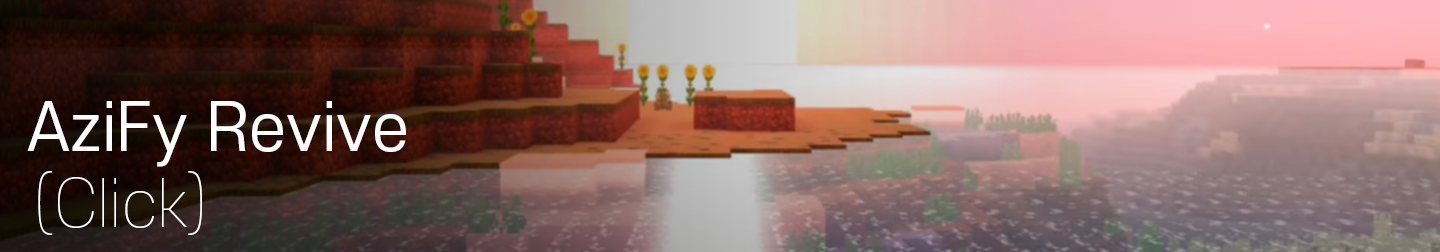
<style>
.page{position:relative;width:1440px;height:252px}
.page>*{position:absolute;margin:0}
.t1{font:64px "S-CoreDream-4Regular";color:#ffffff}
.t2{font:64px "S-CoreDream-1Thin";color:#ffffff}
</style>
<div class="page">
<p class="t1" style="left:27px;top:101px;width:379px;height:66px">AziFy Revive</p>
<p class="t2" style="left:38px;top:171px;width:164px;height:64px">(Click)</p>
</div>
